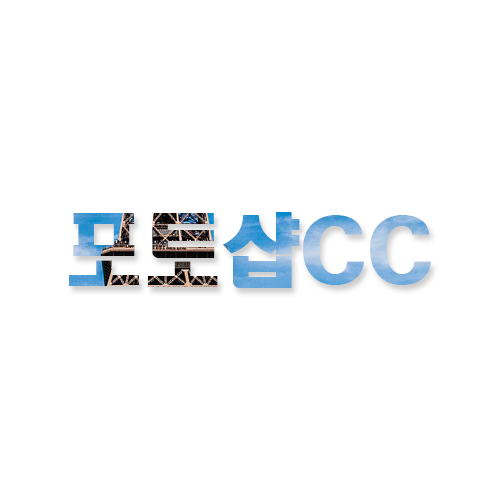
<style>
.page{position:relative;width:500px;height:500px;background:#ffffff}
.page>*{position:absolute;margin:0}
.t1{font:80px "HeadlineR-HM";letter-spacing:-0.02em}
</style>
<div class="page">
<p class="t1" style="left:69px;top:212px;width:362px;height:76px">포토샵CC</p>
</div>
